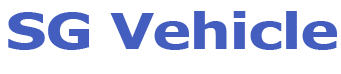
<style>
.page{position:relative;width:341px;height:74px;background:#ffffff}
.page>*{position:absolute;margin:0}
.t1{font:50.2px "Tahoma-Bold";color:#435ebe;scale:1.25 1}
</style>
<div class="page">
<p class="t1" style="left:8px;top:11px;width:329px;height:39px">SG Vehicle</p>
</div>
